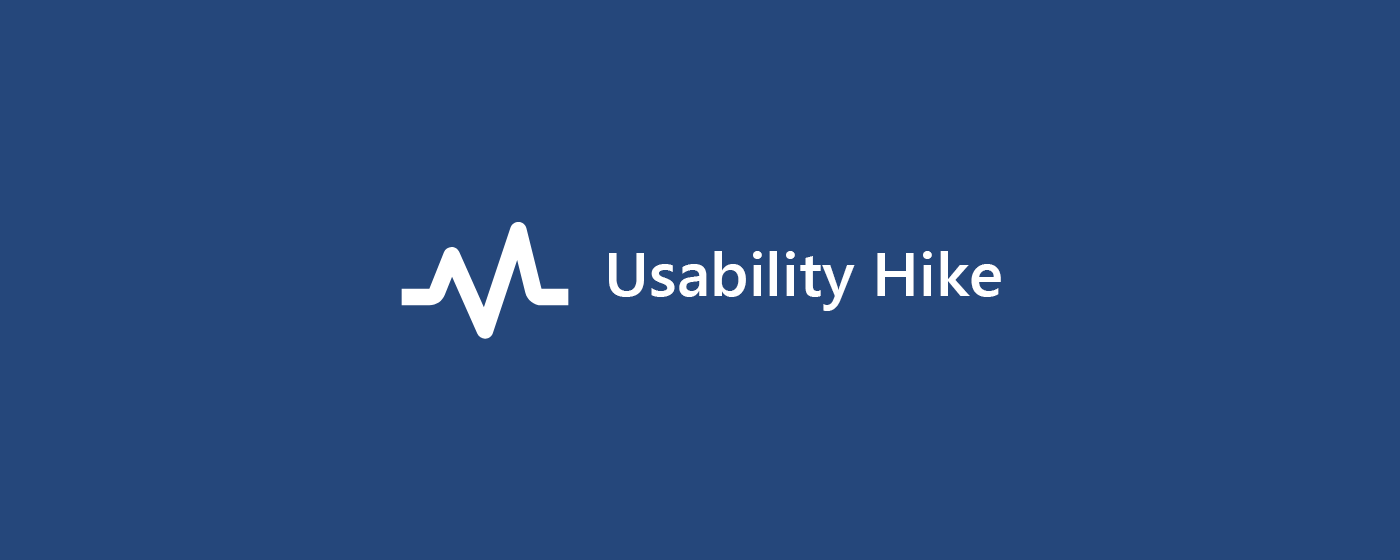
<style>
.page{position:relative;width:1400px;height:560px;background:#25477b}
.page>*{position:absolute;margin:0}
.t1{font:61px "SegoeUI-Semibold";color:#ffffff;scale:1.05 1}
</style>
<div class="page">
<p class="t1" style="left:609px;top:251px;width:392px;height:60px">Usability Hike</p>
</div>
